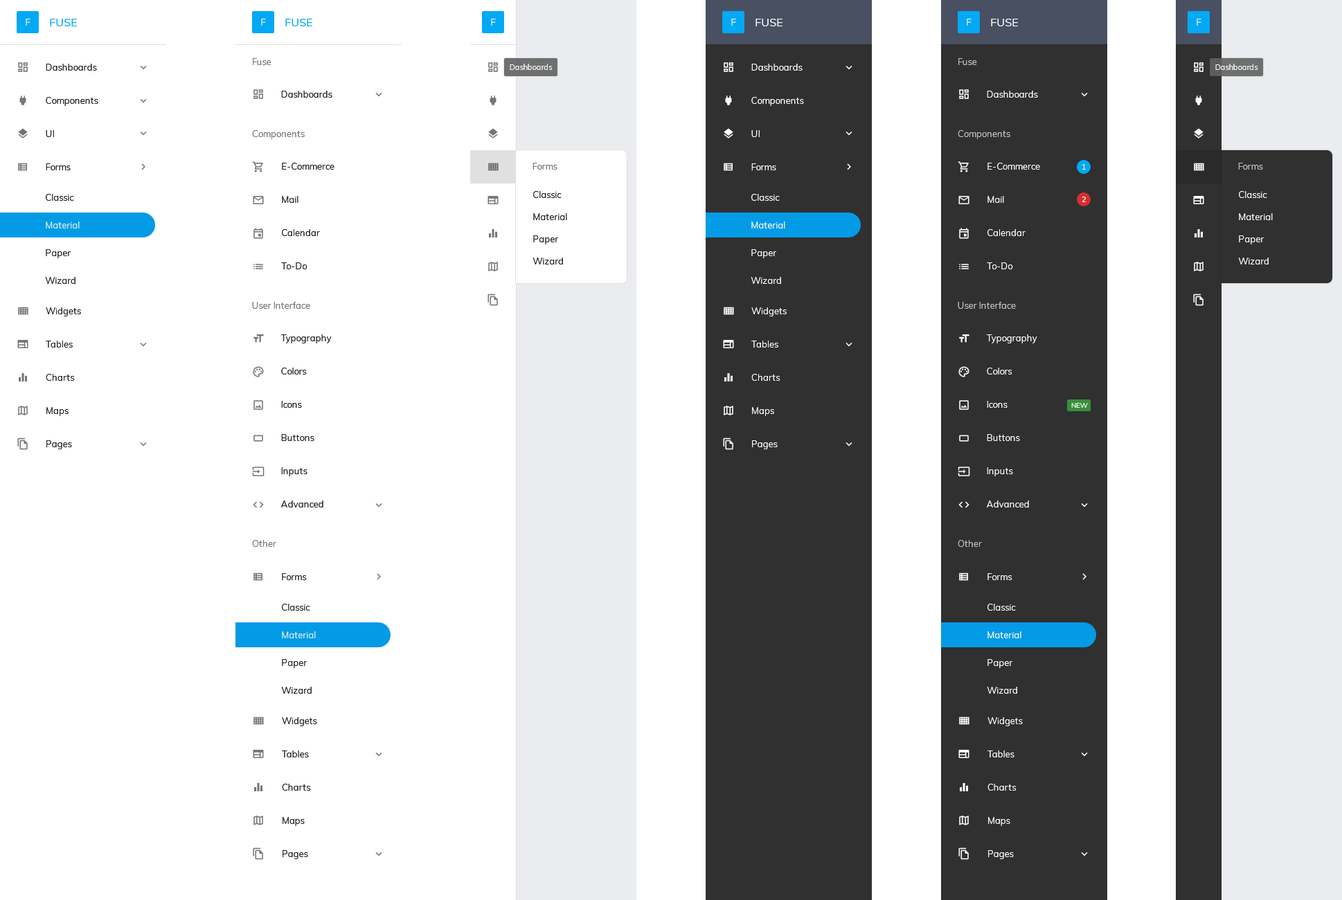
<style>
.page{position:relative;width:1342px;height:900px;background:#ffffff}
.page>*{position:absolute;margin:0}
.t1{font:9.7px "Muli-Regular";color:#ffffff}
.t2{font:11.1px "Muli-Regular";color:#03a9f4}
.t3{font:11.1px "Muli-Regular";color:#ffffff}
.t4{font:9px/33.2px "Muli-Regular";color:#212121}
.t5{font:9px "Muli-Regular";color:#757575}
.t6{font:7.6px "Muli-Regular";color:#ffffff}
.t7{font:9px/33.2px "Muli-Regular";color:#ffffff}
.t8{font:9px "Muli-Regular";color:#c1c1c1}
.t9{font:9px "Muli-Regular";color:#212121}
.t10{font:9px "Muli-Regular";color:#ffffff}
.t11{font:9px/27.7px "Muli-Regular";color:#212121}
.t12{font:9px/22.2px "Muli-Regular";color:#212121}
.t13{font:9px/27.7px "Muli-Regular";color:#ffffff}
.t14{font:9px/22.2px "Muli-Regular";color:#ffffff}
.t15{font:6.9px "Muli-Regular";color:#ffffff}
</style>
<div class="page">
<p class="t1" style="left:26px;top:19px;width:4px;height:7px">F</p>
<p class="t2" style="left:50px;top:19px;width:27px;height:7px">FUSE</p>
<p class="t1" style="left:261px;top:19px;width:5px;height:7px">F</p>
<p class="t2" style="left:285px;top:19px;width:27px;height:7px">FUSE</p>
<p class="t1" style="left:491px;top:19px;width:5px;height:7px">F</p>
<p class="t1" style="left:731px;top:19px;width:5px;height:7px">F</p>
<p class="t3" style="left:755px;top:19px;width:27px;height:7px">FUSE</p>
<p class="t1" style="left:966px;top:19px;width:5px;height:7px">F</p>
<p class="t3" style="left:991px;top:19px;width:27px;height:7px">FUSE</p>
<p class="t1" style="left:1196px;top:19px;width:5px;height:7px">F</p>
<p class="t4" style="left:46px;top:64px;width:52px;height:106px">Dashboards<br>Components<br>UI<br>Forms</p>
<p class="t5" style="left:253px;top:58px;width:18px;height:7px">Fuse</p>
<p class="t6" style="left:510px;top:64px;width:42px;height:6px">Dashboards</p>
<p class="t7" style="left:751px;top:64px;width:53px;height:106px">Dashboards<br>Components<br>UI<br>Forms</p>
<p class="t8" style="left:958px;top:58px;width:19px;height:7px">Fuse</p>
<p class="t6" style="left:1215px;top:64px;width:43px;height:6px">Dashboards</p>
<p class="t9" style="left:281px;top:91px;width:51px;height:7px">Dashboards</p>
<p class="t10" style="left:987px;top:91px;width:51px;height:7px">Dashboards</p>
<p class="t5" style="left:252px;top:130px;width:53px;height:9px">Components</p>
<p class="t8" style="left:957px;top:130px;width:53px;height:9px">Components</p>
<p class="t4" style="left:281px;top:163px;width:53px;height:106px">E-Commerce<br>Mail<br>Calendar<br>To-Do</p>
<p class="t5" style="left:532px;top:163px;width:25px;height:7px">Forms</p>
<p class="t7" style="left:987px;top:163px;width:53px;height:106px">E-Commerce<br>Mail<br>Calendar<br>To-Do</p>
<p class="t6" style="left:1082px;top:164px;width:4px;height:6px">1</p>
<p class="t8" style="left:1238px;top:163px;width:25px;height:7px">Forms</p>
<p class="t11" style="left:45px;top:194px;width:35px;height:90px">Classic<br>Material<br>Paper<br>Wizard</p>
<p class="t12" style="left:532px;top:191px;width:35px;height:73px">Classic<br>Material<br>Paper<br>Wizard</p>
<p class="t13" style="left:750px;top:194px;width:35px;height:90px">Classic<br>Material<br>Paper<br>Wizard</p>
<p class="t6" style="left:1081px;top:197px;width:5px;height:5px">2</p>
<p class="t14" style="left:1238px;top:191px;width:34px;height:73px">Classic<br>Material<br>Paper<br>Wizard</p>
<p class="t5" style="left:252px;top:302px;width:58px;height:7px">User Interface</p>
<p class="t8" style="left:957px;top:302px;width:59px;height:7px">User Interface</p>
<p class="t4" style="left:46px;top:307px;width:35px;height:142px">Widgets<br>Tables<br>Charts<br>Maps<br>Pages</p>
<p class="t7" style="left:751px;top:307px;width:35px;height:142px">Widgets<br>Tables<br>Charts<br>Maps<br>Pages</p>
<p class="t4" style="left:280px;top:334px;width:52px;height:173px">Typography<br>Colors<br>Icons<br>Buttons<br>Inputs<br>Advanced</p>
<p class="t7" style="left:986px;top:334px;width:51px;height:173px">Typography<br>Colors<br>Icons<br>Buttons<br>Inputs<br>Advanced</p>
<p class="t15" style="left:1071px;top:403px;width:17px;height:5px">NEW</p>
<p class="t5" style="left:252px;top:540px;width:24px;height:7px">Other</p>
<p class="t8" style="left:957px;top:540px;width:25px;height:7px">Other</p>
<p class="t9" style="left:282px;top:573px;width:25px;height:7px">Forms</p>
<p class="t10" style="left:987px;top:573px;width:25px;height:7px">Forms</p>
<p class="t11" style="left:281px;top:604px;width:35px;height:90px">Classic<br>Material<br>Paper<br>Wizard</p>
<p class="t13" style="left:987px;top:604px;width:34px;height:90px">Classic<br>Material<br>Paper<br>Wizard</p>
<p class="t4" style="left:282px;top:717px;width:35px;height:142px">Widgets<br>Tables<br>Charts<br>Maps<br>Pages</p>
<p class="t7" style="left:987px;top:717px;width:36px;height:142px">Widgets<br>Tables<br>Charts<br>Maps<br>Pages</p>
</div>
